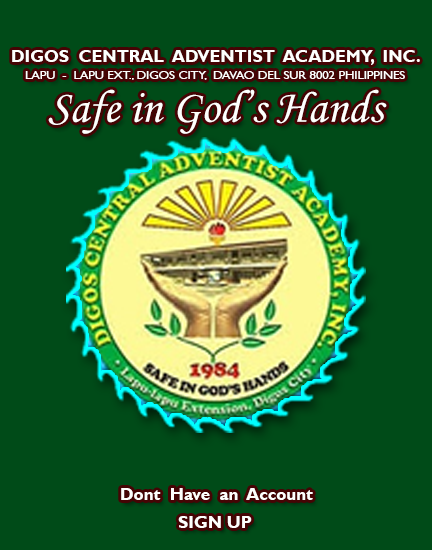
<style>
.page{position:relative;width:432px;height:550px;background:#004b18}
.page>*{position:absolute;margin:0}
.t1{font:16.9px "GillSansMT-Bold";color:#fefffd}
.t2{font:12.5px "GillSansMT";color:#fefffd}
.t3{font:46.4px "MonotypeCorsiva";color:#fefffd}
</style>
<div class="page">
<p class="t1" style="left:12px;top:50px;width:408px;height:15px">DIGOS  CENTRAL  ADVENTIST  ACADEMY,  INC.</p>
<p class="t2" style="left:25px;top:71px;width:380px;height:9px">LAPU  -  LAPU EXT., DIGOS CITY,  DAVAO DEL SUR 8002 PHILIPPINES</p>
<p class="t3" style="left:48px;top:89px;width:339px;height:45px">Safe in God’s Hands</p>
<p class="t1" style="left:121px;top:488px;width:192px;height:12px">Dont  Have  an  Account</p>
<p class="t1" style="left:178px;top:516px;width:74px;height:12px">SIGN UP</p>
</div>
